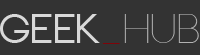
<style>
.page{position:relative;width:200px;height:55px;background:#333333}
.page>*{position:absolute;margin:0}
.t1{font:41px "Neou-Bold";color:#d9d9d9}
.t2{font:41px "Neou-Thin";color:#800409}
.t3{font:41px "Neou-Thin";color:#b2b2b2}
</style>
<div class="page">
<p class="t1" style="left:0px;top:14px;width:199px;height:30px">Geek<span class="t2">_</span><span class="t3">Hub</span></p>
</div>
